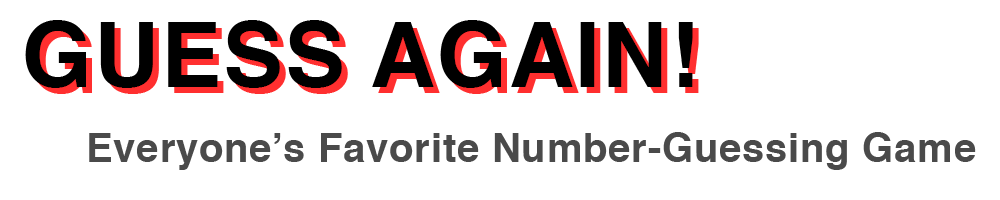
<style>
.page{position:relative;width:1000px;height:200px;background:#ffffff}
.page>*{position:absolute;margin:0}
.t1{font:90px "Helvetica-Bold";letter-spacing:0.02em;color:#000000}
.t2{font:90px "Helvetica-Bold";letter-spacing:0.02em}
.t3{font:40px "Helvetica-Bold";letter-spacing:0.02em;color:#4a4a4a}
</style>
<div class="page">
<p class="t1" style="left:25px;top:20px;width:668px;height:68px">GUESS AGAIN!</p>
<p class="t2" style="left:31px;top:26px;width:668px;height:68px">GUESS AGAIN!</p>
<p class="t3" style="left:89px;top:132px;width:887px;height:38px">Everyone’s Favorite Number-Guessing Game</p>
</div>
